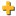
<style>
.page{position:relative;width:16px;height:16px;background:#ffffff}
.page>*{position:absolute;margin:0}
.t1{font:24px "Arial-BoldMT";color:#ffba25;font-weight:bold;scale:0.9 1}
</style>
<div class="page">
<p class="t1" style="left:2px;top:1px;width:12px;height:14px">+</p>
</div>
